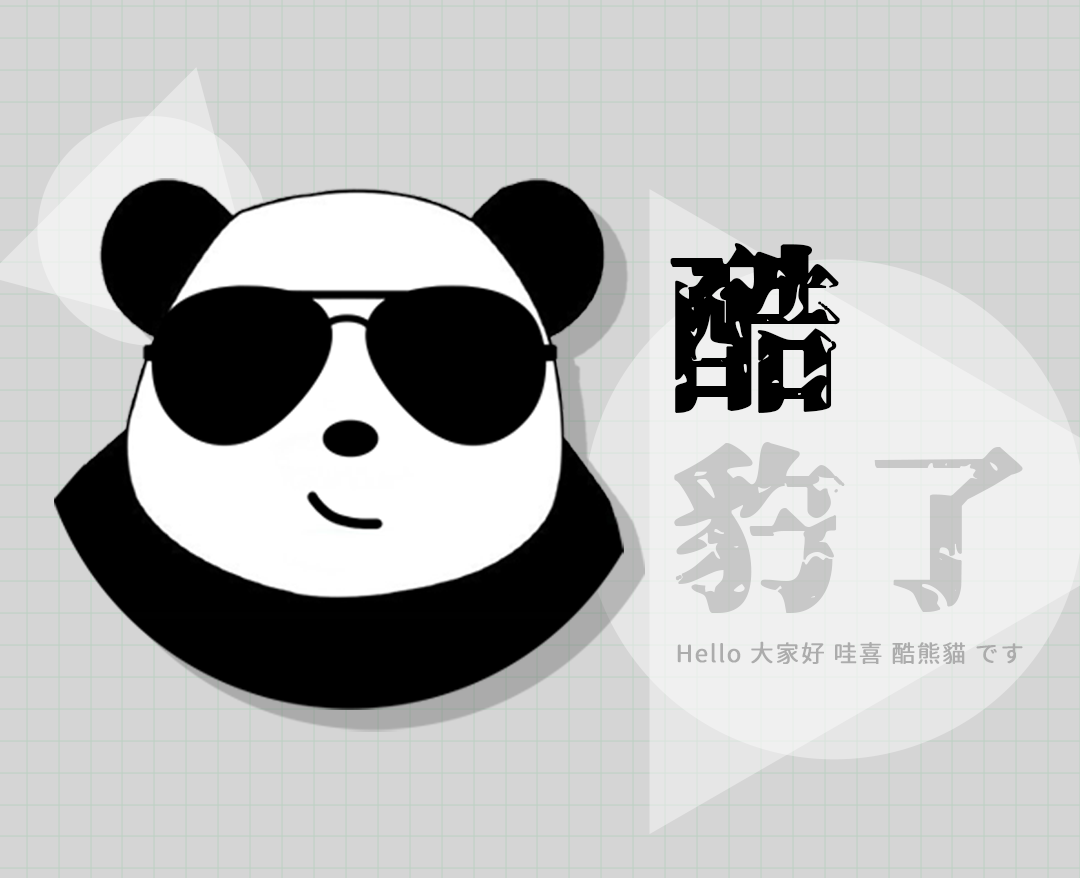
<style>
.page{position:relative;width:1080px;height:878px;background:#d5d5d5}
.page>*{position:absolute;margin:0}
.t1{font:174.9px "Genkaimincho";letter-spacing:0.05em;color:#000000;font-weight:bold}
.t2{font:174.9px "Genkaimincho";letter-spacing:0.05em;color:#c8c8c8;font-weight:bold}
.t3{font:23.8px "GenJyuuGothic-Regular";letter-spacing:0.05em;color:#acacac;font-weight:bold}
</style>
<div class="page">
<p class="t1" style="left:670px;top:243px;width:170px;height:170px">酷</p>
<p class="t2" style="left:674px;top:442px;width:349px;height:171px">豹了</p>
<p class="t3" style="left:677px;top:641px;width:346px;height:23px">Hello 大家好 哇喜 酷熊貓 です</p>
</div>
